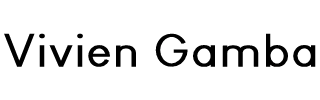
<style>
.page{position:relative;width:320px;height:100px;background:#ffffff}
.page>*{position:absolute;margin:0}
.t1{font:79px "LouisGeorgeCafe";color:#000000;font-weight:bold}
</style>
<div class="page">
<p class="t1" style="left:4px;top:33px;width:312px;height:34px">Vivien Gamba</p>
</div>
